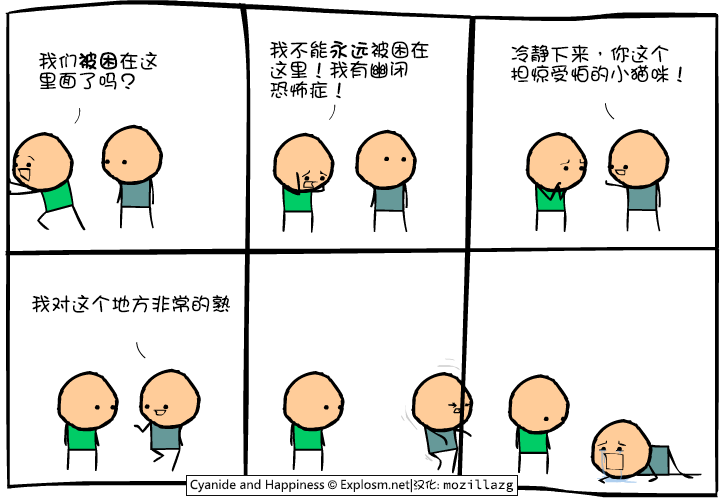
<style>
.page{position:relative;width:720px;height:500px;background:#ffffff}
.page>*{position:absolute;margin:0}
.t1{font:20px/20px "DFGirl";color:#000000}
.t2{font:20px/20px "DFGirl";color:#000000;font-weight:bold}
.t3{font:20px "DFGirl";color:#000000}
</style>
<div class="page">
<p class="t1" style="left:269px;top:40px;width:160px;height:59px">我不能<span class="t2">永远</span>被困在<br>这里！我有幽闭<br>恐怖症！</p>
<p class="t1" style="left:38px;top:51px;width:119px;height:39px">我们<span class="t2">被困</span>在这<br>里面了吗？</p>
<p class="t1" style="left:511px;top:44px;width:171px;height:39px">冷静下来，你这个<br>担惊受怕的小猫咪！</p>
<p class="t3" style="left:31px;top:294px;width:199px;height:19px">我对这个地方非常的熟</p>
</div>
